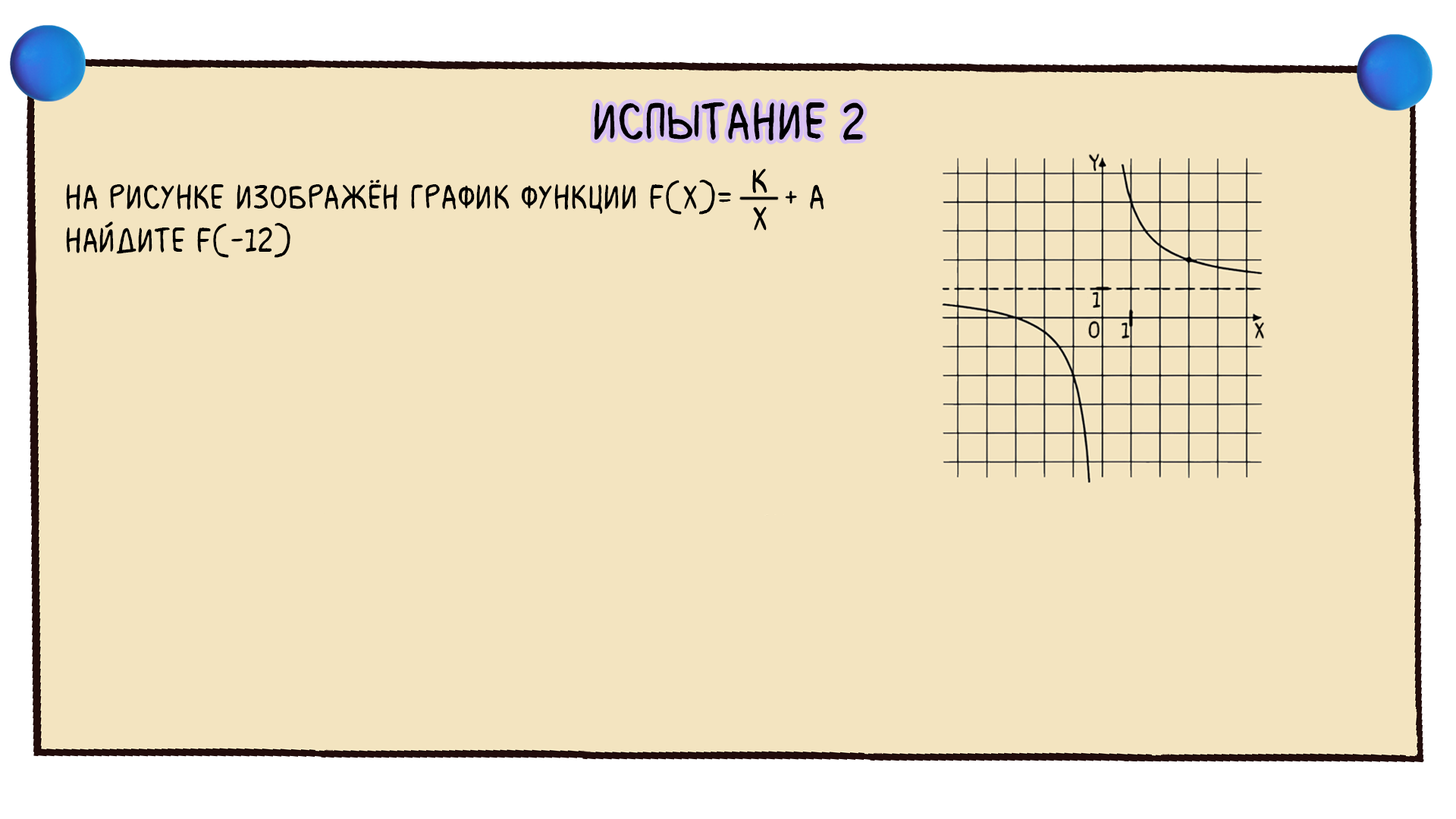
<style>
.page{position:relative;width:1456px;height:819px;background:#f3e4c0}
.page>*{position:absolute;margin:0}
.t1{font:54.6px "MilkMustacheBB";color:#000000}
.t2{font:36.4px "MilkMustacheBB";color:#000000}
</style>
<div class="page">
<p class="t1" style="left:594px;top:102px;width:270px;height:39px">испытание 2</p>
<p class="t2" style="left:66px;top:180px;width:758px;height:78px">На рисунке изображён график функции f(x)=     + a<br>Найдите f(-12)</p>
</div>
